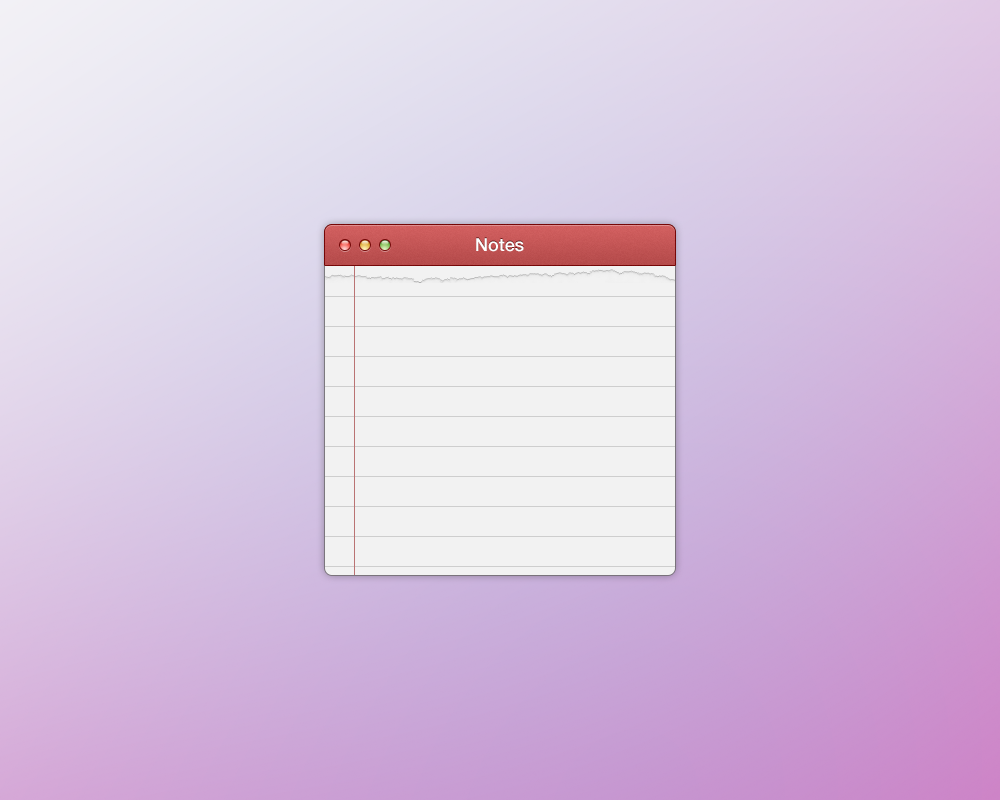
<style>
.page{position:relative;width:1000px;height:800px}
.page>*{position:absolute;margin:0}
.t1{font:18px "HelveticaNeue-Medium";color:#ffffff}
</style>
<div class="page">
<p class="t1" style="left:476px;top:238px;width:48px;height:14px">Notes</p>
</div>
